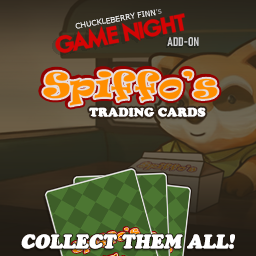
<style>
.page{position:relative;width:256px;height:256px}
.page>*{position:absolute;margin:0}
.t1{font:7.5px "Verdana";color:#ffffff}
.t2{font:7.5px "Verdana";color:#ababab}
.t3{font:12.5px "Bahnschrift-SemiBoldCondensed";color:#cfcfcf}
.t4{font:32.5px "Ravie";color:#ff8e00}
.t5{font:12px "CooperBlackStd";color:#ffffff}
.t6{font:19.4px "CooperBlackStd-Italic";color:#ffffff}
</style>
<div class="page">
<p class="t1" style="left:75px;top:9px;width:87px;height:20px;rotate:-10deg">CHUCKLEBERRY FINN<span class="t2">’s</span></p>
<p class="t3" style="left:167px;top:37px;width:32px;height:9px">ADD-ON</p>
<p class="t4" style="left:43px;top:71px;width:175px;height:35px">Spiffo’s</p>
<p class="t5" style="left:89px;top:107px;width:117px;height:10px">TRADING CARDS</p>
<p class="t6" style="left:21px;top:234px;width:214px;height:15px">COLLECT THEM ALL!</p>
</div>
